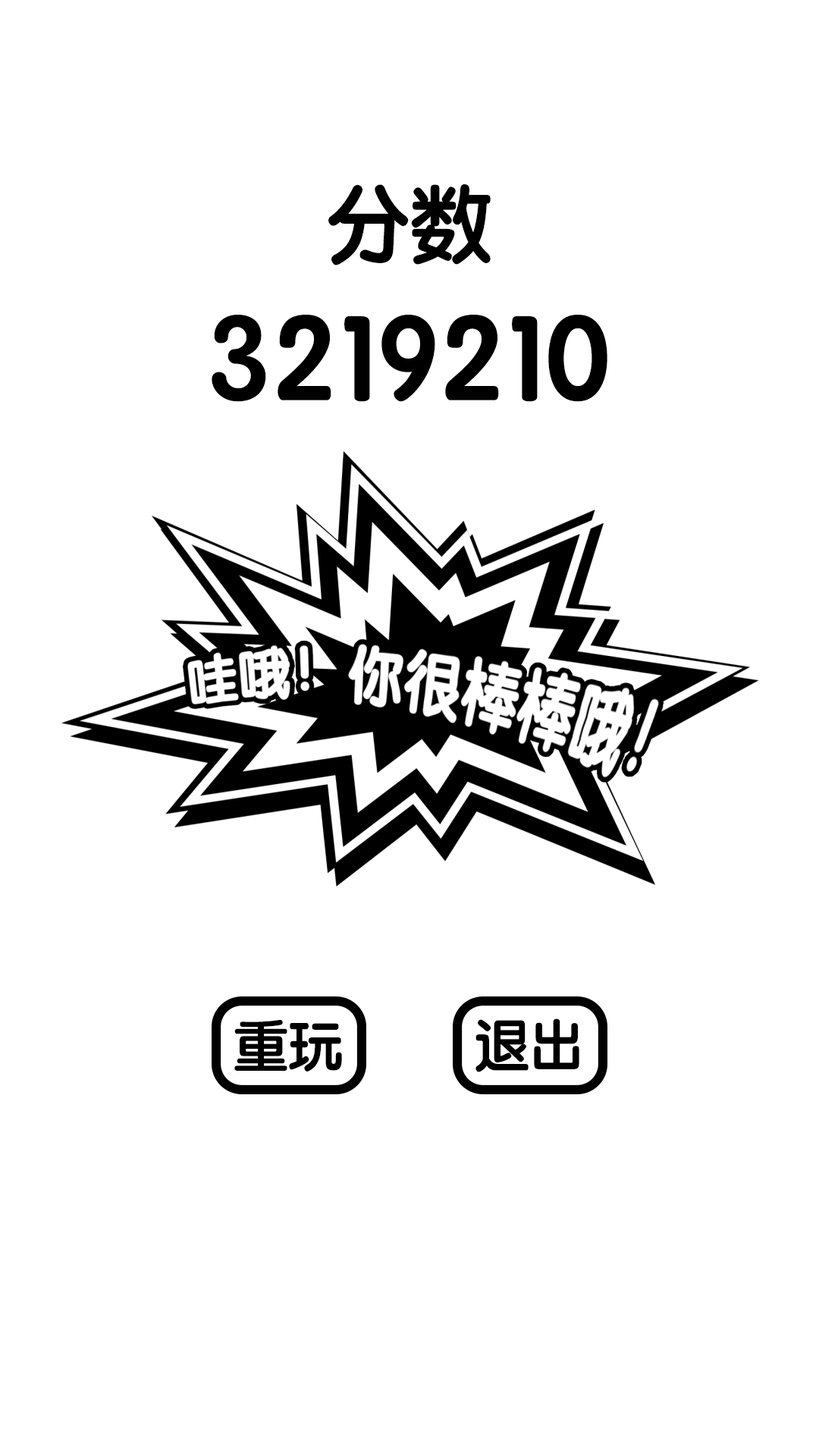
<style>
.page{position:relative;width:819px;height:1456px;background:#ffffff}
.page>*{position:absolute;margin:0}
.t1{font:82.7px "STYuanti-SC-Bold";color:#000000}
.t2{font:120.7px "STYuanti-SC-Bold";color:#000000}
.t3{font:54.6px "STYuanti-SC-Bold";color:#000000}
</style>
<div class="page">
<p class="t1" style="left:328px;top:184px;width:163px;height:81px">分数</p>
<p class="t2" style="left:212px;top:315px;width:395px;height:87px">3219210</p>
<p class="t3" style="left:234px;top:1020px;width:108px;height:52px">重玩</p>
<p class="t3" style="left:475px;top:1018px;width:104px;height:54px">退出</p>
</div>
